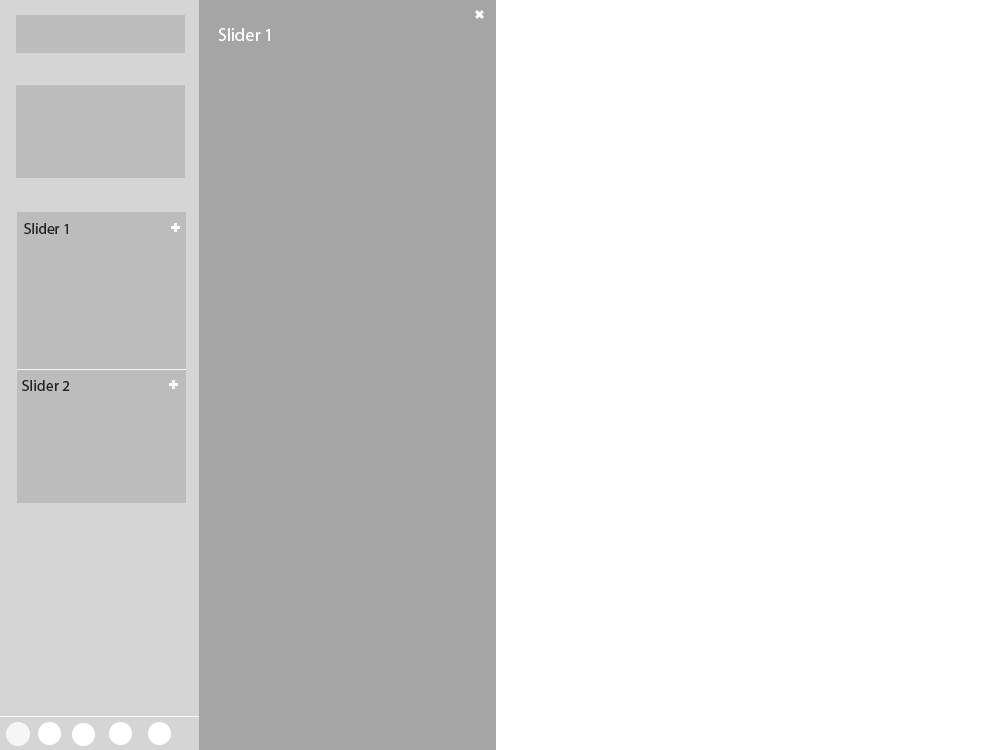
<style>
.page{position:relative;width:1000px;height:750px;background:#ffffff}
.page>*{position:absolute;margin:0}
.t1{font:18px "MyriadPro-Regular";color:#ffffff}
.t2{font:15px "MyriadPro-Regular";color:#222222}
</style>
<div class="page">
<p class="t1" style="left:218px;top:28px;width:52px;height:13px">Slider 1</p>
<p class="t2" style="left:24px;top:223px;width:44px;height:11px">Slider 1</p>
<p class="t2" style="left:22px;top:380px;width:48px;height:11px">Slider 2</p>
</div>
